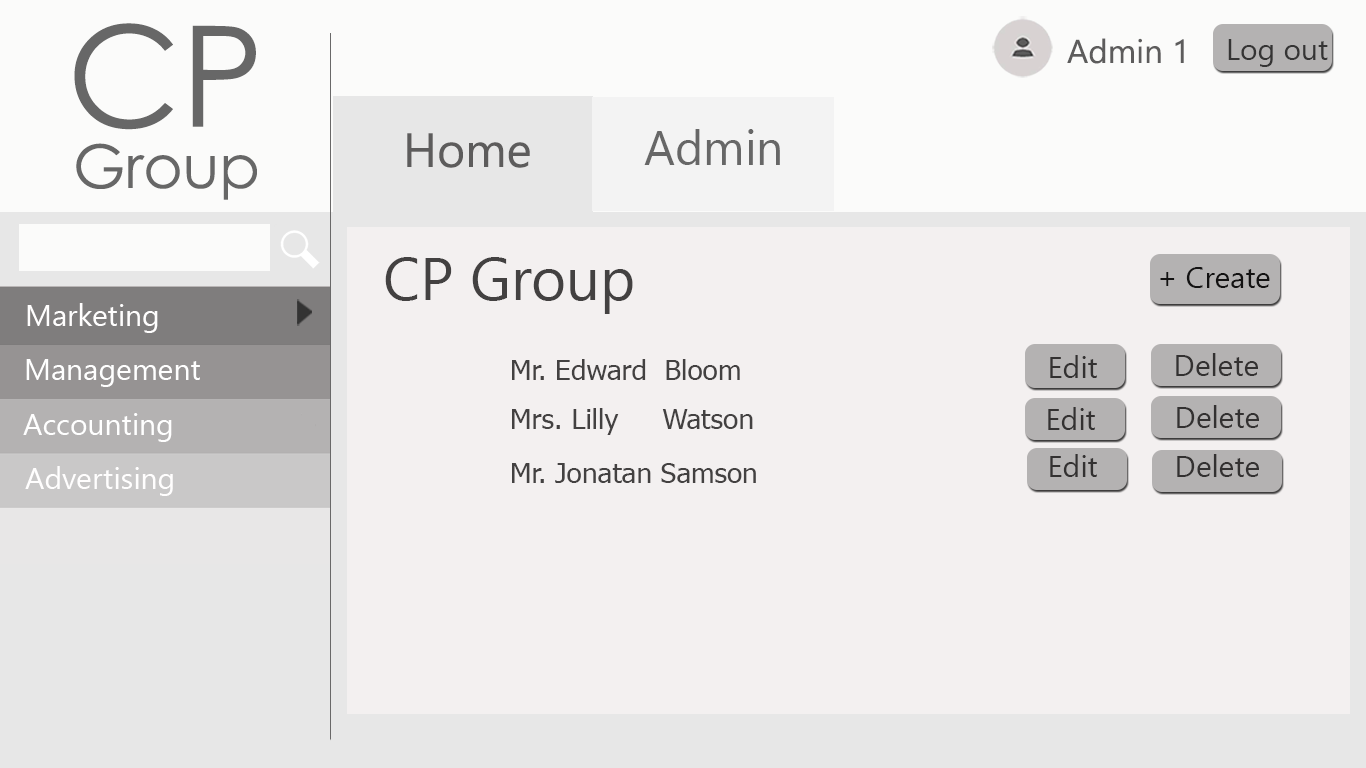
<style>
.page{position:relative;width:1366px;height:768px;background:#f3f0f0}
.page>*{position:absolute;margin:0}
.t1{font:140px "CenturyGothic";color:#676767}
.t2{font:33px "SegoeUI";color:#5d5c5c}
.t3{font:30px "SegoeUI";color:#353434}
.t4{font:48px "SegoeUI";color:#5d5c5c}
.t5{font:48px "SegoeUI";color:#676767}
.t6{font:60px "CenturyGothic";color:#676767}
.t7{font:60px "SegoeUI";color:#434141}
.t8{font:30px "SegoeUI";color:#131212}
.t9{font:30px "SegoeUI";color:#fffefe}
.t10{font:30px "SegoeUI";color:#333131}
.t11{font:30px "SegoeUI";color:#ffffff}
.t12{font:28px "Tahoma";color:#434141}
</style>
<div class="page">
<p class="t1" style="left:74px;top:23px;width:182px;height:107px">CP</p>
<p class="t2" style="left:1067px;top:38px;width:117px;height:26px">Admin 1</p>
<p class="t3" style="left:1228px;top:39px;width:100px;height:28px">Log out</p>
<p class="t4" style="left:407px;top:133px;width:123px;height:35px">Home</p>
<p class="t5" style="left:644px;top:129px;width:136px;height:36px">Admin</p>
<p class="t6" style="left:76px;top:143px;width:181px;height:57px">Group</p>
<p class="t7" style="left:385px;top:257px;width:248px;height:57px">CP Group</p>
<p class="t8" style="left:1160px;top:267px;width:110px;height:21px">+ Create</p>
<p class="t9" style="left:27px;top:303px;width:131px;height:30px">Marketing</p>
<p class="t10" style="left:1176px;top:353px;width:82px;height:23px">Delete</p>
<p class="t11" style="left:26px;top:359px;width:174px;height:28px">Management</p>
<p class="t12" style="left:512px;top:359px;width:228px;height:21px">Mr. Edward  Bloom</p>
<p class="t10" style="left:1050px;top:355px;width:47px;height:23px">Edit</p>
<p class="t11" style="left:23px;top:413px;width:149px;height:29px">Accounting</p>
<p class="t12" style="left:512px;top:408px;width:241px;height:27px">Mrs. Lilly     Watson</p>
<p class="t10" style="left:1048px;top:407px;width:47px;height:23px">Edit</p>
<p class="t10" style="left:1177px;top:405px;width:82px;height:23px">Delete</p>
<p class="t10" style="left:1050px;top:454px;width:47px;height:23px">Edit</p>
<p class="t10" style="left:1177px;top:454px;width:82px;height:23px">Delete</p>
<p class="t9" style="left:25px;top:466px;width:148px;height:30px">Advertising</p>
<p class="t12" style="left:512px;top:463px;width:244px;height:20px">Mr. Jonatan Samson</p>
</div>
